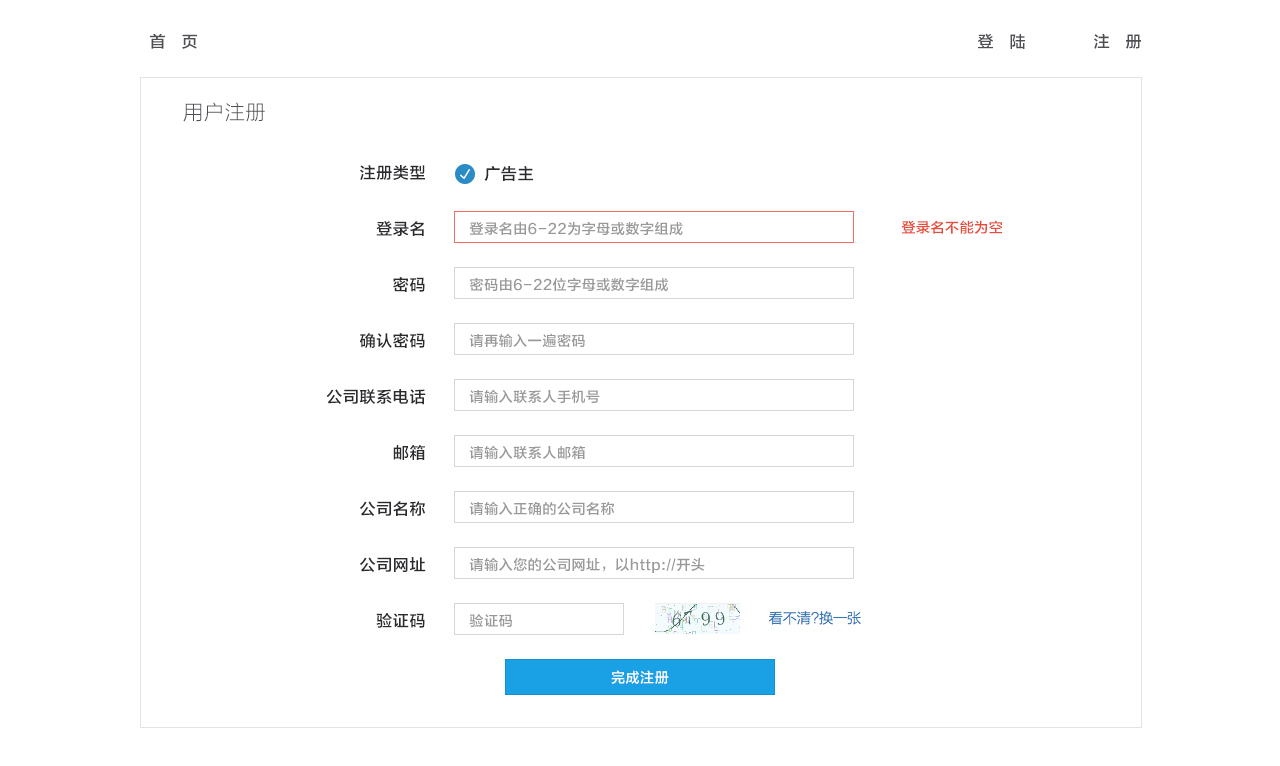
<style>
.page{position:relative;width:1280px;height:766px;background:#ffffff}
.page>*{position:absolute;margin:0}
.t1{font:16px "FZLTZHK--GBK1-0";letter-spacing:0.04em;color:#4f4e54}
.t2{font:20px "FZLTXHK--GBK1-0";letter-spacing:0.04em;color:#4f4e54}
.t3{font:16px/56px "FZLTZHK--GBK1-0";letter-spacing:0.04em;color:#2b2b2f}
.t4{font:16px "FZLTZHK--GBK1-0";letter-spacing:0.04em;color:#2b2b2f}
.t5{font:14px/56px "FZLTZHK--GBK1-0";letter-spacing:0.04em;color:#999999}
.t6{font:14px "FZLTZHK--GBK1-0";letter-spacing:0.04em;color:#e84c3c}
.t7{font:14px "FZLTZHK--GBK1-0";letter-spacing:0.04em;color:#ffffff}
</style>
<div class="page">
<p class="t1" style="left:150px;top:33px;width:47px;height:16px">首   页</p>
<p class="t1" style="left:978px;top:33px;width:47px;height:16px">登   陆</p>
<p class="t1" style="left:1094px;top:33px;width:47px;height:16px">注   册</p>
<p class="t2" style="left:183px;top:102px;width:82px;height:20px">用户注册</p>
<p class="t3" style="left:326px;top:165px;width:100px;height:463px;text-align:right">注册类型<br>登录名<br>密码<br>确认密码<br>公司联系电话<br>邮箱<br>公司名称<br>公司网址<br>验证码</p>
<p class="t4" style="left:484px;top:166px;width:49px;height:15px">广告主</p>
<p class="t5" style="left:469px;top:222px;width:236px;height:405px">登录名由6-22为字母或数字组成<br>密码由6-22位字母或数字组成<br>请再输入一遍密码<br>请输入联系人手机号<br>请输入联系人邮箱<br>请输入正确的公司名称<br>请输入您的公司网址，以http://开头<br>验证码</p>
<p class="t6" style="left:901px;top:220px;width:102px;height:14px">登录名不能为空</p>
<p class="t7" style="left:611px;top:670px;width:58px;height:14px">完成注册</p>
</div>
